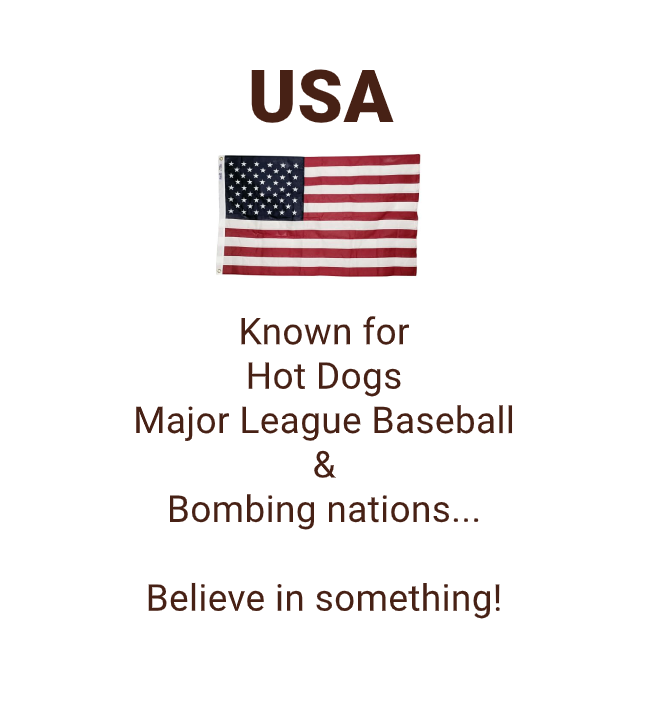
<style>
.page{position:relative;width:657px;height:720px;background:#ffffff}
.page>*{position:absolute;margin:0}
.t1{font:73px "Roboto-Black";letter-spacing:0.01em;color:#472115}
.t2{font:37px "Roboto-Regular";letter-spacing:0.01em;color:#472115}
</style>
<div class="page">
<p class="t1" style="left:251px;top:69px;width:143px;height:54px">USA</p>
<p class="t2" style="left:136px;top:316px;width:377px;height:303px;text-align:center">Known for <br>Hot Dogs <br>Major League Baseball <br>&amp; <br>Bombing nations...<br><br>Believe in something!</p>
</div>
